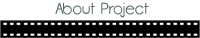
<style>
.page{position:relative;width:200px;height:38px;background:#ffffff}
.page>*{position:absolute;margin:0}
.t1{font:16px "Opificio-Rounded";color:#576666}
</style>
<div class="page">
<p class="t1" style="left:55px;top:2px;width:94px;height:16px">About Project</p>
</div>
